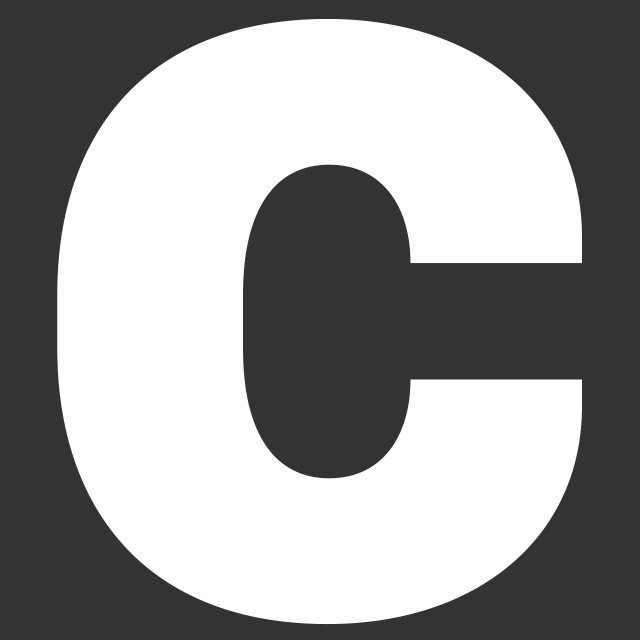
<style>
.page{position:relative;width:640px;height:640px;background:#333333}
.page>*{position:absolute;margin:0}
.t1{font:877.2px "SanFranciscoDisplay-Black";color:#ffffff}
</style>
<div class="page">
<p class="t1" style="left:57px;top:18px;width:525px;height:607px">C</p>
</div>
